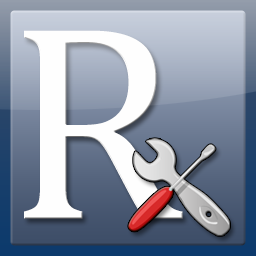
<style>
.page{position:relative;width:256px;height:256px}
.page>*{position:absolute;margin:0}
.t1{font:281.5px "Cambria";color:#fefefe}
</style>
<div class="page">
<p class="t1" style="left:24px;top:30px;width:159px;height:189px">R</p>
</div>
